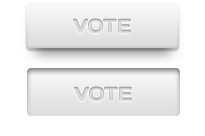
<style>
.page{position:relative;width:205px;height:136px;background:#ffffff}
.page>*{position:absolute;margin:0}
.t1{font:19.4px "Days";color:#cfcfcf;text-transform:uppercase}
</style>
<div class="page">
<p class="t1" style="left:73px;top:18px;width:58px;height:15px">vote</p>
</div>
